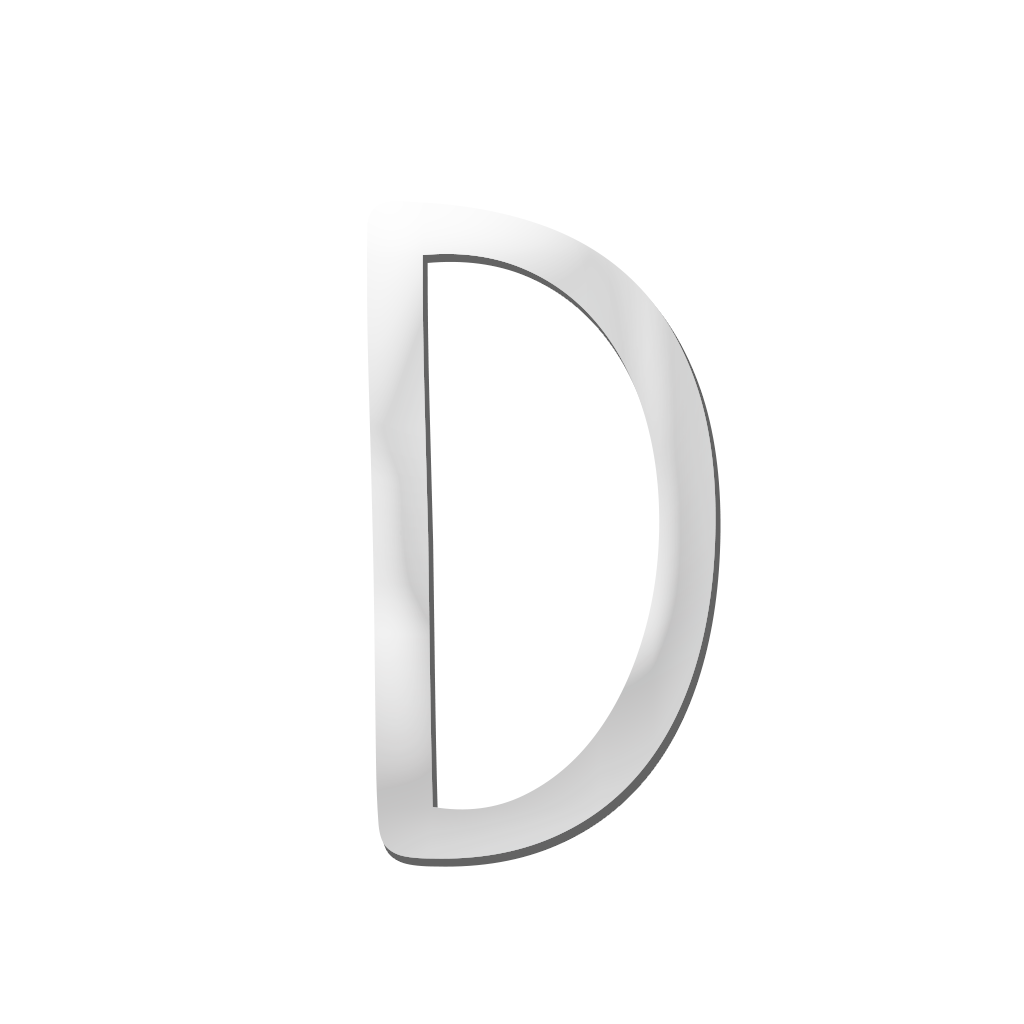
<style>
.page{position:relative;width:1024px;height:1024px;background:#ffffff}
.page>*{position:absolute;margin:0}
.t1{font:857px "NanumBarunpen";color:#d8d8d8;scale:1.07 1}
</style>
<div class="page">
<p class="t1" style="left:367px;top:201px;width:349px;height:658px">D</p>
</div>
